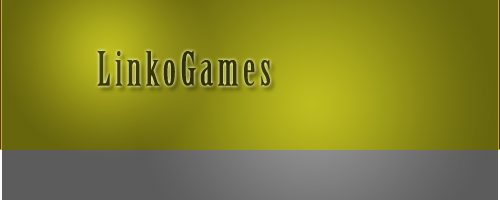
<style>
.page{position:relative;width:500px;height:200px}
.page>*{position:absolute;margin:0}
.t1{font:46px "BirchStd";letter-spacing:0.1em;color:#353508}
</style>
<div class="page">
<p class="t1" style="left:97px;top:51px;width:173px;height:35px">LinkoGames</p>
</div>
